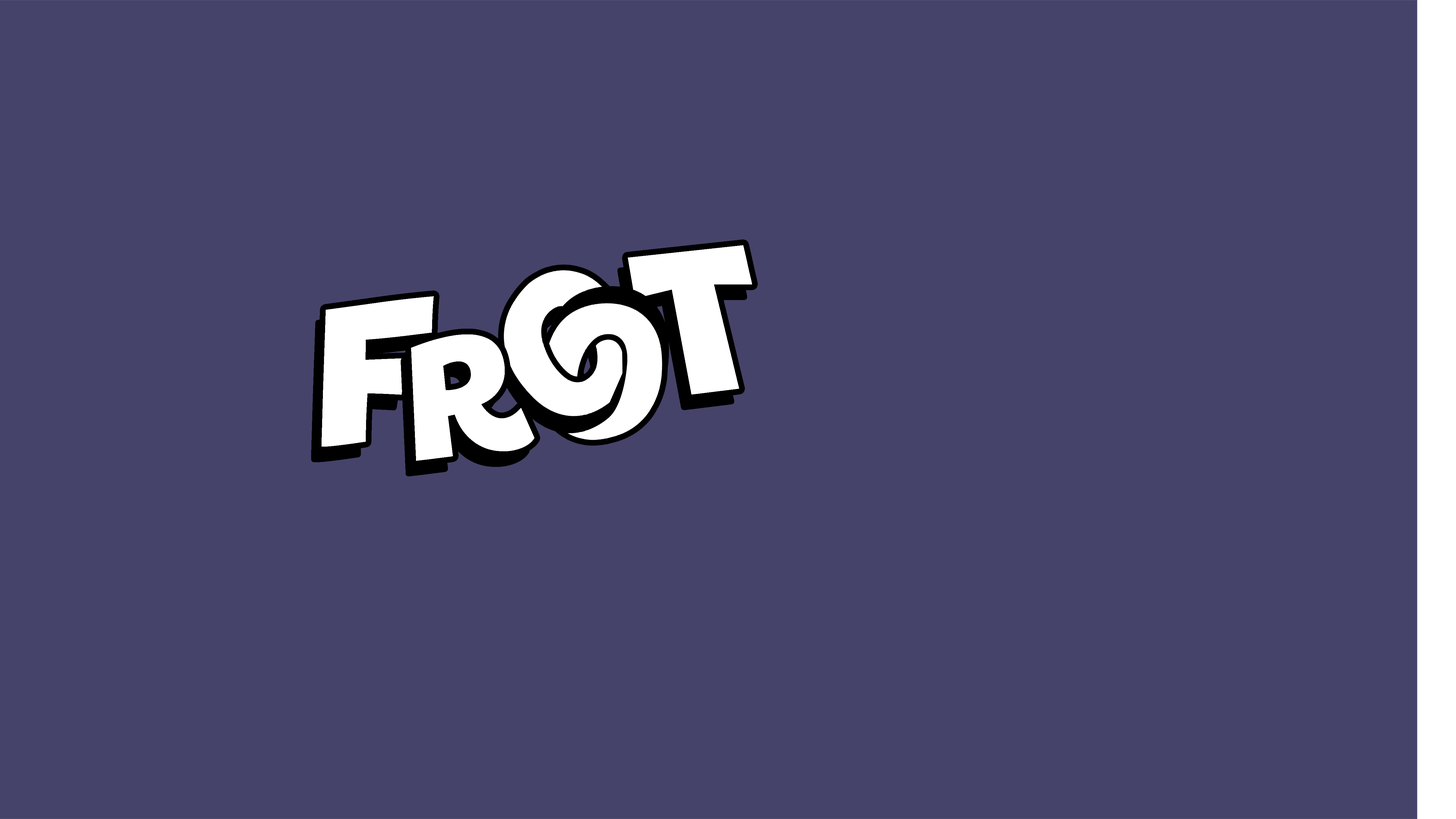
<style>
.page{position:relative;width:1456px;height:819px;background:#454369}
.page>*{position:absolute;margin:0}
.t1{font:221.8px "FrootLoops";color:#ffffff}
.t2{font:172.9px "FrootLoops";color:#ffffff}
</style>
<div class="page">
<p class="t1" style="left:628px;top:245px;width:124px;height:149px;rotate:-14deg">T</p>
<p class="t1" style="left:322px;top:296px;width:112px;height:151px">F</p>
<p class="t2" style="left:411px;top:334px;width:123px;height:127px;rotate:-6deg">R</p>
</div>
